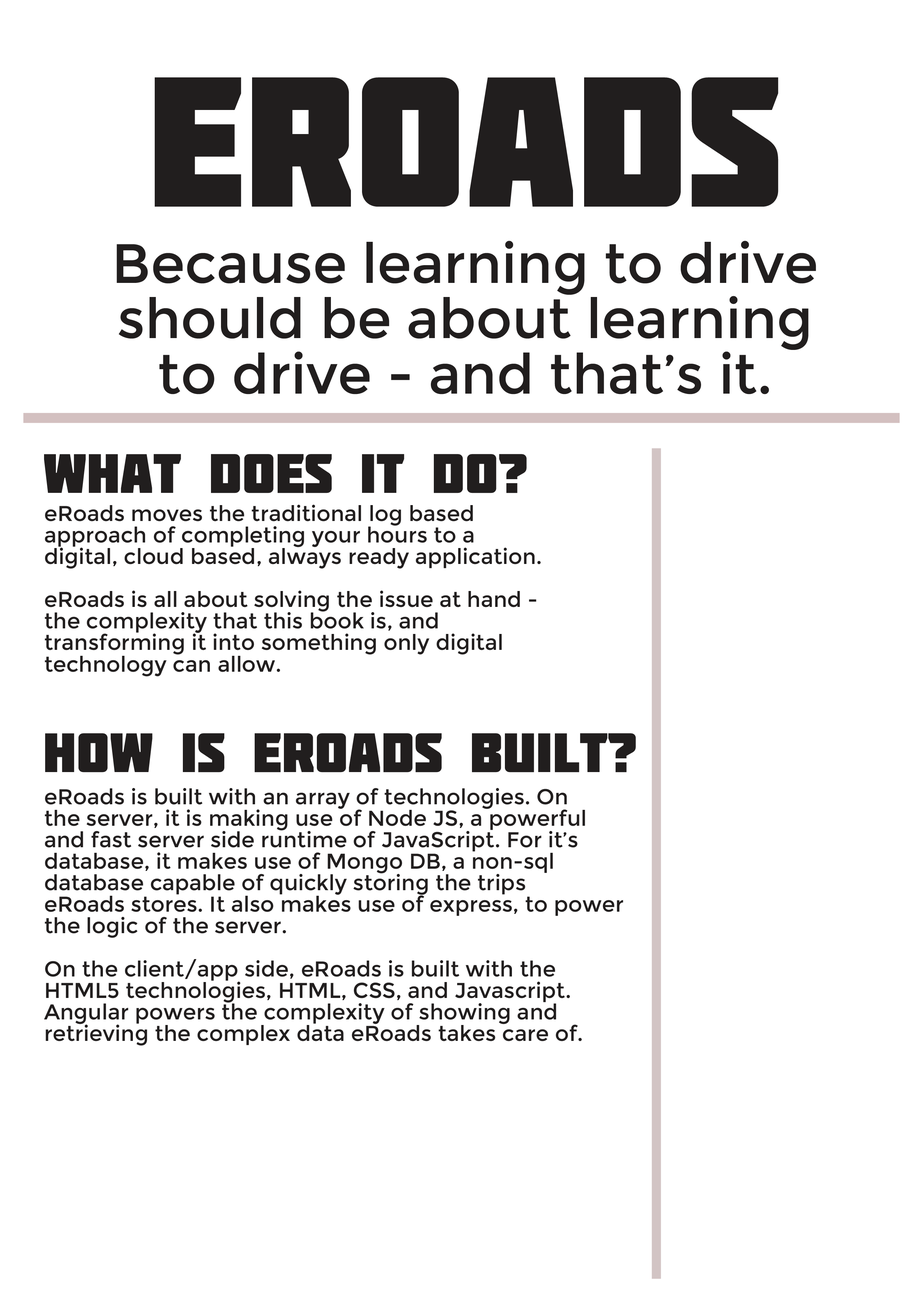
<style>
.page{position:relative;width:918px;height:1299px;background:#ffffff}
.page>*{position:absolute;margin:0}
.t1{font:184.4px "Molot";color:#211e1e}
.t2{font:55.3px/55.3px "Montserrat-Regular";color:#211e1e}
.t3{font:55.3px "Molot";color:#211e1e}
.t4{font:21.5px/21.5px "Montserrat-Regular";color:#211e1e}
</style>
<div class="page">
<p class="t1" style="left:155px;top:77px;width:624px;height:130px">eRoads</p>
<p class="t2" style="left:117px;top:241px;width:699px;height:153px;text-align:center">Because learning to drive<br>should be about learning<br>to drive - and that’s it.</p>
<p class="t3" style="left:44px;top:454px;width:483px;height:39px">What does it do?</p>
<p class="t4" style="left:45px;top:505px;width:496px;height:171px">eRoads moves the traditional log based<br>approach of completing your hours to a<br>digital, cloud based, always ready application.<br><br>eRoads is all about solving the issue at hand - <br>the complexity that this book is, and<br>transforming it into something only digital<br>technology can allow.</p>
<p class="t3" style="left:45px;top:733px;width:591px;height:39px">How is eRoads built?</p>
<p class="t4" style="left:44px;top:788px;width:579px;height:258px">eRoads is built with an array of technologies. On<br>the server, it is making use of Node JS, a powerful<br>and fast server side runtime of JavaScript. For it’s<br>database, it makes use of Mongo DB, a non-sql<br>database capable of quickly storing the trips<br>eRoads stores. It also makes use of express, to power<br>the logic of the server.<br><br>On the client/app side, eRoads is built with the <br>HTML5 technologies, HTML, CSS, and Javascript.<br>Angular powers the complexity of showing and<br>retrieving the complex data eRoads takes care of.</p>
</div>
